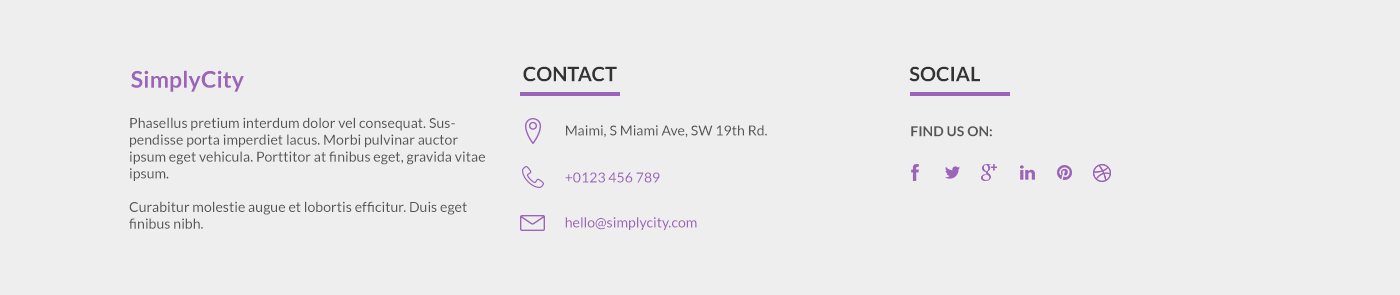
<style>
.page{position:relative;width:1400px;height:295px;background:#eeeeee}
.page>*{position:absolute;margin:0}
.t1{font:23px "Lato-Bold";letter-spacing:0.005em;color:#9b64b8}
.t2{font:20px "Lato-Bold";color:#333333}
.t3{font:14px "Lato-Regular";letter-spacing:0.005em;color:#555555}
.t4{font:14px "Lato-Bold";letter-spacing:0.005em;color:#555555}
.t5{font:14px "Lato-Regular";letter-spacing:0.005em;color:#9b64b8}
</style>
<div class="page">
<p class="t1" style="left:131px;top:70px;width:113px;height:22px">SimplyCity</p>
<p class="t2" style="left:523px;top:66px;width:94px;height:16px">CONTACT</p>
<p class="t2" style="left:909px;top:66px;width:71px;height:16px">SOCIAL</p>
<p class="t3" style="left:129px;top:117px;width:356px;height:112px">Phasellus pretium interdum dolor vel consequat. Suspendisse porta imperdiet lacus. Morbi pulvinar auctor ipsum eget vehicula. Porttitor at finibus eget, gravida vitae ipsum.<br><br>Curabitur molestie augue et lobortis efficitur. Duis eget finibus nibh.</p>
<p class="t3" style="left:566px;top:125px;width:201px;height:13px">Maimi, S Miami Ave, SW 19th Rd.</p>
<p class="t4" style="left:911px;top:126px;width:81px;height:11px">FIND US ON:</p>
<p class="t5" style="left:565px;top:172px;width:95px;height:11px">+0123 456 789</p>
<p class="t5" style="left:565px;top:217px;width:132px;height:13px">hello@simplycity.com</p>
</div>
